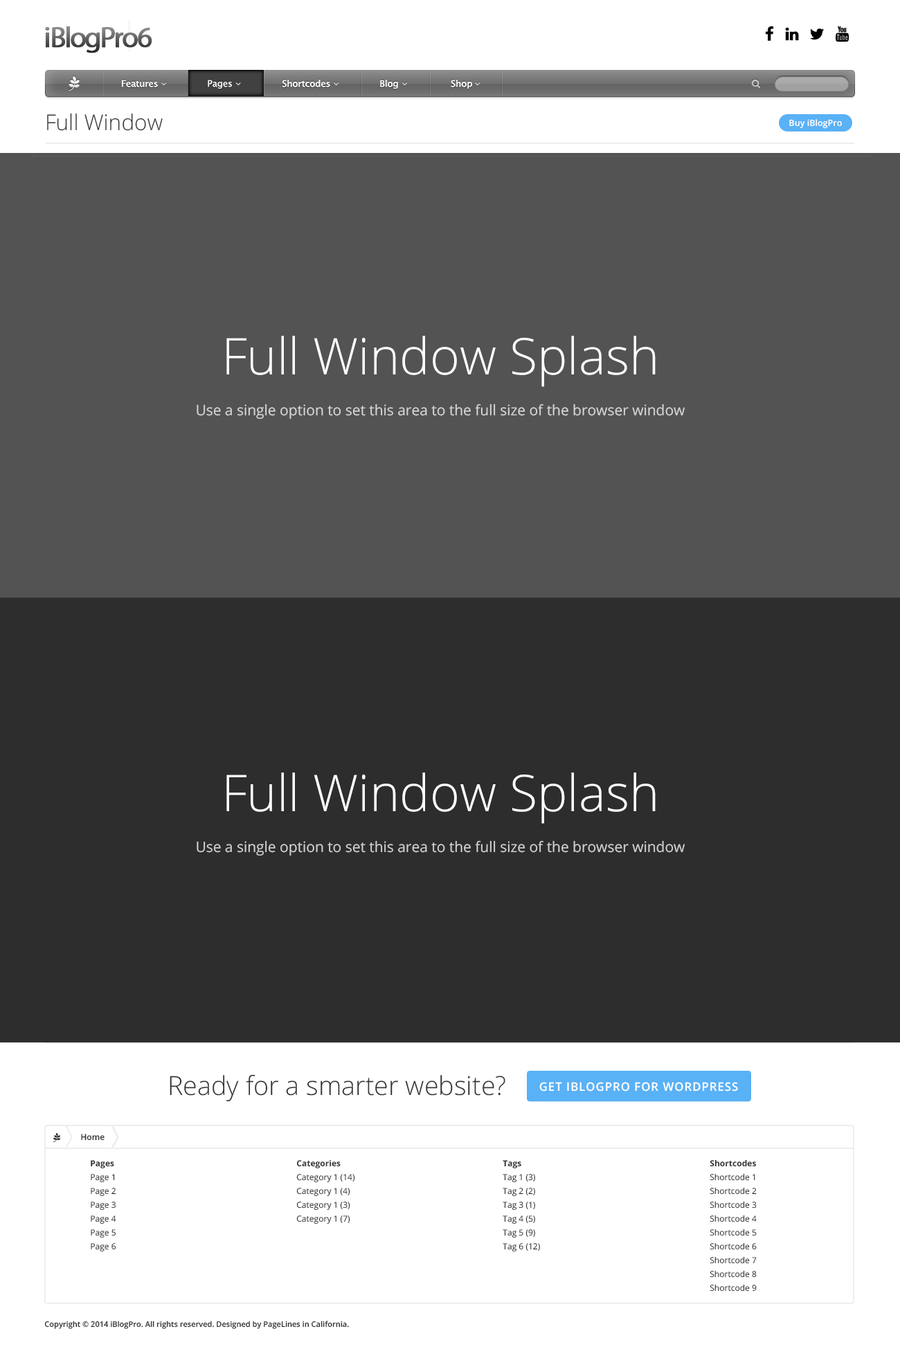
<style>
.page{position:relative;width:900px;height:1349px;background:#2d2d2d}
.page>*{position:absolute;margin:0}
.t1{font:29.1px "MyriadPro-Regular";letter-spacing:-0.065em;font-weight:bold}
.t2{font:9px "LucidaSansUnicode";color:#ffffff}
.t3{font:21.7px "OpenSans-Light";color:#333333}
.t4{font:8.7px "OpenSans-Semibold";color:#ffffff}
.t5{font:50.7px "OpenSans-Light";color:#ffffff}
.t6{font:14.5px "OpenSans";color:#d5d5d5}
.t7{font:14.5px "OpenSans";color:#d0d0d0}
.t8{font:26.3px "OpenSans-Light";color:#333333}
.t9{font:11.7px "OpenSans-Semibold";letter-spacing:0.06em;color:#ffffff;text-transform:uppercase}
.t10{font:8.3px "OpenSans-Semibold";color:#333333}
.t11{font:8.3px/13.8px "OpenSans";color:#333333}
.t12{font:8.3px/13.8px "OpenSans-Bold";color:#333333}
.t13{font:7.6px "OpenSans-Semibold";color:#333333}
</style>
<div class="page">
<p class="t1" style="left:45px;top:26px;width:107px;height:27px">iBlogPro6</p>
<p class="t2" style="left:122px;top:80px;width:350px;height:9px">Features         Pages         Shortcodes                Blog             Shop</p>
<p class="t2" style="left:122px;top:80px;width:350px;height:9px">Features         Pages         Shortcodes                Blog             Shop</p>
<p class="t2" style="left:208px;top:80px;width:24px;height:9px">Pages</p>
<p class="t3" style="left:47px;top:113px;width:116px;height:18px">Full Window</p>
<p class="t4" style="left:789px;top:119px;width:53px;height:10px">Buy iBlogPro</p>
<p class="t5" style="left:226px;top:336px;width:430px;height:51px">Full Window Splash</p>
<p class="t6" style="left:197px;top:404px;width:488px;height:16px">Use a single option to set this area to the full size of the browser window</p>
<p class="t5" style="left:226px;top:773px;width:430px;height:51px">Full Window Splash</p>
<p class="t7" style="left:197px;top:840px;width:488px;height:16px">Use a single option to set this area to the full size of the browser window</p>
<p class="t8" style="left:170px;top:1074px;width:335px;height:28px">Ready for a smarter website?</p>
<p class="t9" style="left:539px;top:1082px;width:199px;height:10px">Get iBlogPro for WordPress</p>
<p class="t10" style="left:81px;top:1134px;width:24px;height:7px">Home</p>
<p class="t11" style="left:91px;top:1160px;width:25px;height:92px"><span class="t12">Pages<br></span>Page 1<br>Page 2<br>Page 3<br>Page 4<br>Page 5<br>Page 6</p>
<p class="t11" style="left:296px;top:1160px;width:59px;height:65px"><span class="t12">Categories<br></span>Category 1 (14)<br>Category 1 (4)<br>Category 1 (3)<br>Category 1 (7)</p>
<p class="t11" style="left:503px;top:1160px;width:37px;height:92px"><span class="t12">Tags<br></span>Tag 1 (3)<br>Tag 2 (2)<br>Tag 3 (1)<br>Tag 4 (5)<br>Tag 5 (9)<br>Tag 6 (12)</p>
<p class="t11" style="left:710px;top:1160px;width:47px;height:132px"><span class="t12">Shortcodes<br></span>Shortcode 1<br>Shortcode 2<br>Shortcode 3<br>Shortcode 4<br>Shortcode 5<br>Shortcode 6<br>Shortcode 7<br>Shortcode 8<br>Shortcode 9</p>
<p class="t13" style="left:44px;top:1321px;width:305px;height:8px">Copyright © 2014 iBlogPro. All rights reserved. Designed by PageLines in California.</p>
</div>
